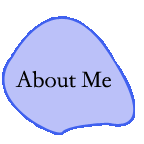
<style>
.page{position:relative;width:144px;height:144px;background:#ffffff}
.page>*{position:absolute;margin:0}
.t1{font:24px "STFangsong";color:#020200}
</style>
<div class="page">
<p class="t1" style="left:15px;top:70px;width:96px;height:18px">About Me</p>
</div>
